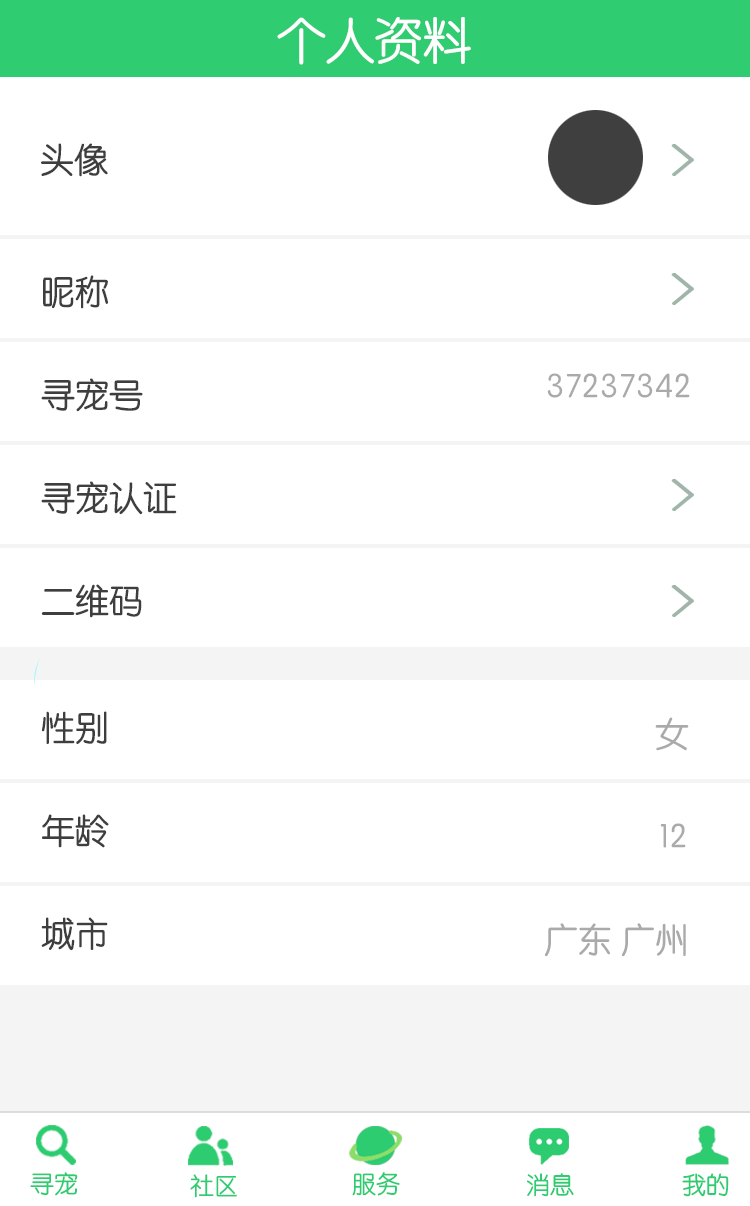
<style>
.page{position:relative;width:750px;height:1206px;background:#ffffff}
.page>*{position:absolute;margin:0}
.t1{font:48.7px "STYuanti-SC-Regular";color:#ffffff}
.t2{font:34px "STYuanti-SC-Regular";color:#3e3e3e}
.t3{font:34px/103px "STYuanti-SC-Regular";color:#3e3e3e}
.t4{font:34px/126px "STYuanti-SC-Regular";color:#3e3e3e}
.t5{font:34px "STYuanti-SC-Regular";color:#aaaaaa}
.t6{font:34px/103px "STYuanti-SC-Regular";color:#aaaaaa}
.t7{font:24px "STYuanti-SC-Regular";color:#2ecc71}
.t8{font:24px "STYuanti-SC-Regular"}
</style>
<div class="page">
<p class="t1" style="left:277px;top:17px;width:194px;height:48px">个人资料</p>
<p class="t2" style="left:41px;top:143px;width:67px;height:34px">头像</p>
<p class="t3" style="left:41px;top:275px;width:136px;height:343px"><span class="t4"><br><br></span>昵称<br>寻宠号<br>寻宠认证<br>二维码</p>
<p class="t5" style="left:547px;top:373px;width:143px;height:25px">37237342</p>
<p class="t3" style="left:41px;top:711px;width:68px;height:240px">性别<br>年龄<br>城市</p>
<p class="t6" style="left:544px;top:717px;width:145px;height:240px;text-align:right">女<br>12<br>广东 广州</p>
<p class="t7" style="left:30px;top:1172px;width:48px;height:24px">寻宠</p>
<p class="t7" style="left:190px;top:1174px;width:47px;height:24px">社区</p>
<p class="t8" style="left:352px;top:1173px;width:48px;height:24px">服务</p>
<p class="t7" style="left:352px;top:1172px;width:48px;height:24px">服务</p>
<p class="t8" style="left:526px;top:1173px;width:47px;height:24px">消息</p>
<p class="t7" style="left:527px;top:1173px;width:47px;height:24px">消息</p>
<p class="t7" style="left:682px;top:1173px;width:47px;height:24px">我的</p>
<p class="t7" style="left:682px;top:1173px;width:47px;height:24px">我的</p>
</div>
